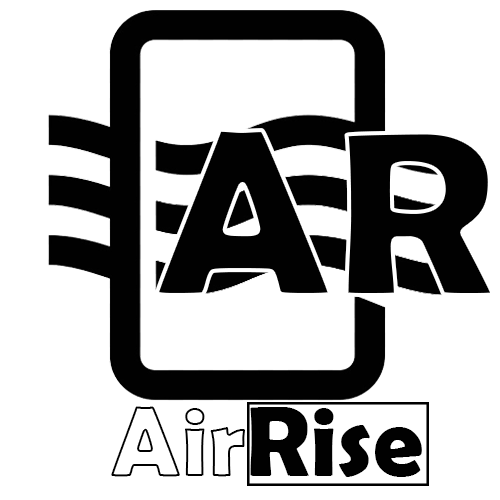
<style>
.page{position:relative;width:500px;height:500px;background:#ffffff}
.page>*{position:absolute;margin:0}
.t1{font:240.8px "BerlinSansFBDemi-Bold";color:#010101;scale:1.07 1}
.t2{font:100px "BerlinSansFBDemi-Bold";color:#010101}
.t3{font:100px "BerlinSansFBDemi-Bold";color:#ffffff}
</style>
<div class="page">
<p class="t1" style="left:154px;top:127px;width:341px;height:170px">AR</p>
<p class="t2" style="left:111px;top:406px;width:311px;height:71px"><span class="t3">Air</span>Rise</p>
</div>
